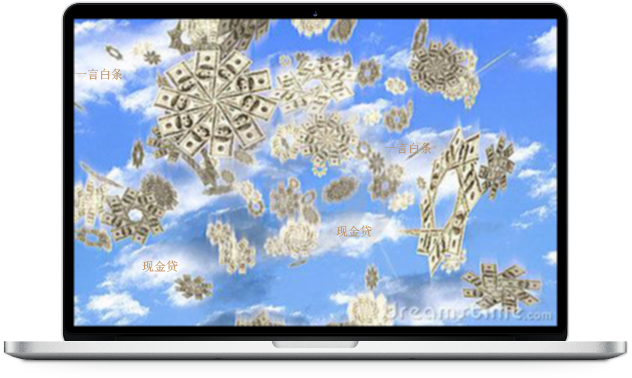
<style>
.page{position:relative;width:632px;height:378px}
.page>*{position:absolute;margin:0}
.t1{font:12px "Fixedsys";color:#bc9060}
</style>
<div class="page">
<p class="t1" style="left:75px;top:68px;width:48px;height:12px">一言白条</p>
<p class="t1" style="left:384px;top:142px;width:48px;height:12px">一言白条</p>
<p class="t1" style="left:336px;top:225px;width:36px;height:12px">现金贷</p>
<p class="t1" style="left:142px;top:260px;width:36px;height:12px">现金贷</p>
</div>
